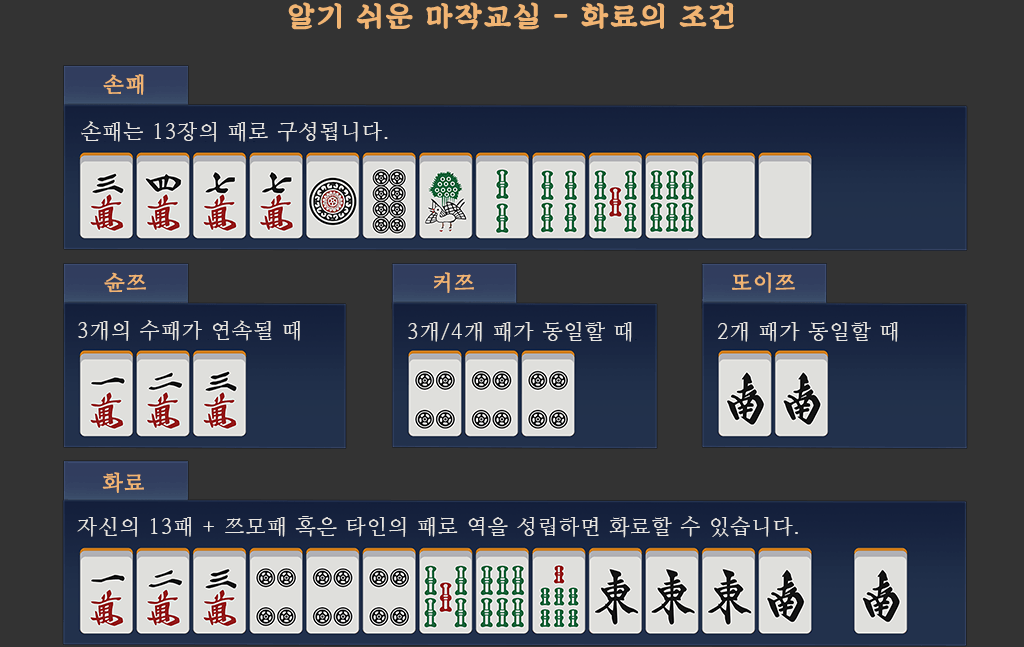
<style>
.page{position:relative;width:1024px;height:647px;background:#333333}
.page>*{position:absolute;margin:0}
.t1{font:29px "SDKukdetopokki-aLt";letter-spacing:0.06em;color:#f1b472;font-weight:bold}
.t2{font:21px "NanumMyeongjo";letter-spacing:0.06em;color:#f1b472;font-weight:bold}
.t3{font:21px "NanumMyeongjo";letter-spacing:0.06em;color:#e7e5e1}
</style>
<div class="page">
<p class="t1" style="left:288px;top:2px;width:446px;height:28px">알기 쉬운 마작교실 - 화료의 조건</p>
<p class="t2" style="left:103px;top:74px;width:41px;height:21px">손패</p>
<p class="t3" style="left:81px;top:121px;width:307px;height:21px">손패는 13장의 패로 구성됩니다.</p>
<p class="t2" style="left:104px;top:272px;width:42px;height:21px">슌쯔</p>
<p class="t2" style="left:434px;top:272px;width:40px;height:21px">커쯔</p>
<p class="t2" style="left:732px;top:272px;width:63px;height:21px">또이쯔</p>
<p class="t3" style="left:78px;top:320px;width:222px;height:21px">3개의 수패가 연속될 때</p>
<p class="t3" style="left:408px;top:322px;width:224px;height:20px">3개/4개 패가 동일할 때</p>
<p class="t3" style="left:718px;top:322px;width:180px;height:20px">2개 패가 동일할 때</p>
<p class="t2" style="left:102px;top:472px;width:42px;height:21px">화료</p>
<p class="t3" style="left:77px;top:516px;width:721px;height:22px">자신의 13패 + 쯔모패 혹은 타인의 패로 역을 성립하면 화료할 수 있습니다.</p>
</div>
